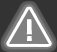
<style>
.page{position:relative;width:57px;height:52px;background:#333333}
.page>*{position:absolute;margin:0}
.t1{font:30px "OpenDyslexic-Bold";color:#fefefe}
</style>
<div class="page">
<p class="t1" style="left:26px;top:19px;width:6px;height:22px">!</p>
</div>
